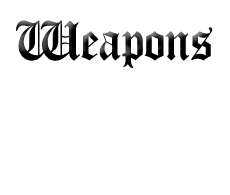
<style>
.page{position:relative;width:230px;height:195px;background:#ffffff}
.page>*{position:absolute;margin:0}
.t1{font:60px "Oldchristmas-Regular";color:#000000}
</style>
<div class="page">
<p class="t1" style="left:16px;top:20px;width:197px;height:49px">Weapons</p>
</div>
